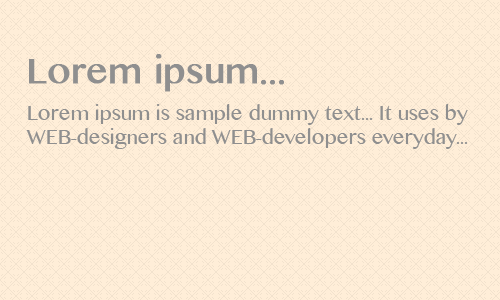
<style>
.page{position:relative;width:500px;height:300px;background:#ffeed8}
.page>*{position:absolute;margin:0}
.t1{font:36px "GurmukhiMN";color:#8f8f8f;font-weight:bold}
.t2{font:20px "GurmukhiMN";color:#8f8f8f}
</style>
<div class="page">
<p class="t1" style="left:29px;top:54px;width:255px;height:38px">Lorem ipsum...</p>
<p class="t2" style="left:26px;top:104px;width:442px;height:45px">Lorem ipsum is sample dummy text... It uses by <br>WEB-designers and WEB-developers everyday...</p>
</div>
